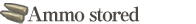
<style>
.page{position:relative;width:196px;height:24px;background:#ffffff}
.page>*{position:absolute;margin:0}
.t1{font:20px "RyuminPro-ExBold";letter-spacing:-0.08em;color:#4d4843}
</style>
<div class="page">
<p class="t1" style="left:27px;top:6px;width:113px;height:16px">Ammo stored</p>
</div>
